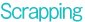
<style>
.page{position:relative;width:85px;height:22px;background:#ffffff}
.page>*{position:absolute;margin:0}
.t1{font:20px "GothicMB101Pro-Regular";letter-spacing:-0.06em;color:#1dbcc0;scale:0.9 1}
</style>
<div class="page">
<p class="t1" style="left:0px;top:2px;width:83px;height:20px">Scrapping</p>
</div>
